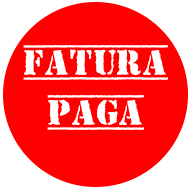
<style>
.page{position:relative;width:190px;height:190px;background:#ff0000}
.page>*{position:absolute;margin:0}
.t1{font:36px "TopSecret";color:#ffffff}
</style>
<div class="page">
<p class="t1" style="left:23px;top:45px;width:145px;height:35px">FATURA</p>
<p class="t1" style="left:47px;top:95px;width:97px;height:35px">PAGA</p>
</div>
